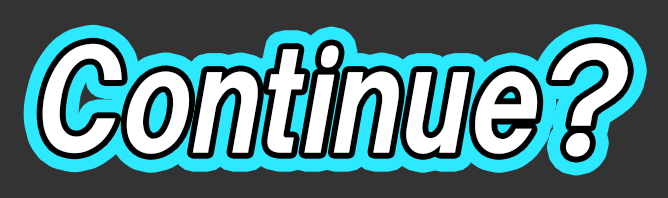
<style>
.page{position:relative;width:668px;height:198px;background:#333333}
.page>*{position:absolute;margin:0}
.t1{font:133.3px "HGPSoeiKakugothicUB";color:#ffffff;font-style:italic}
</style>
<div class="page">
<p class="t1" style="left:42px;top:43px;width:586px;height:114px">Continue?</p>
</div>
